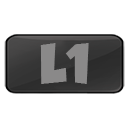
<style>
.page{position:relative;width:128px;height:128px;background:#ffffff}
.page>*{position:absolute;margin:0}
.t1{font:47.6px "GROBOLD";color:#8a8989}
</style>
<div class="page">
<p class="t1" style="left:40px;top:43px;width:49px;height:41px">L1</p>
</div>
